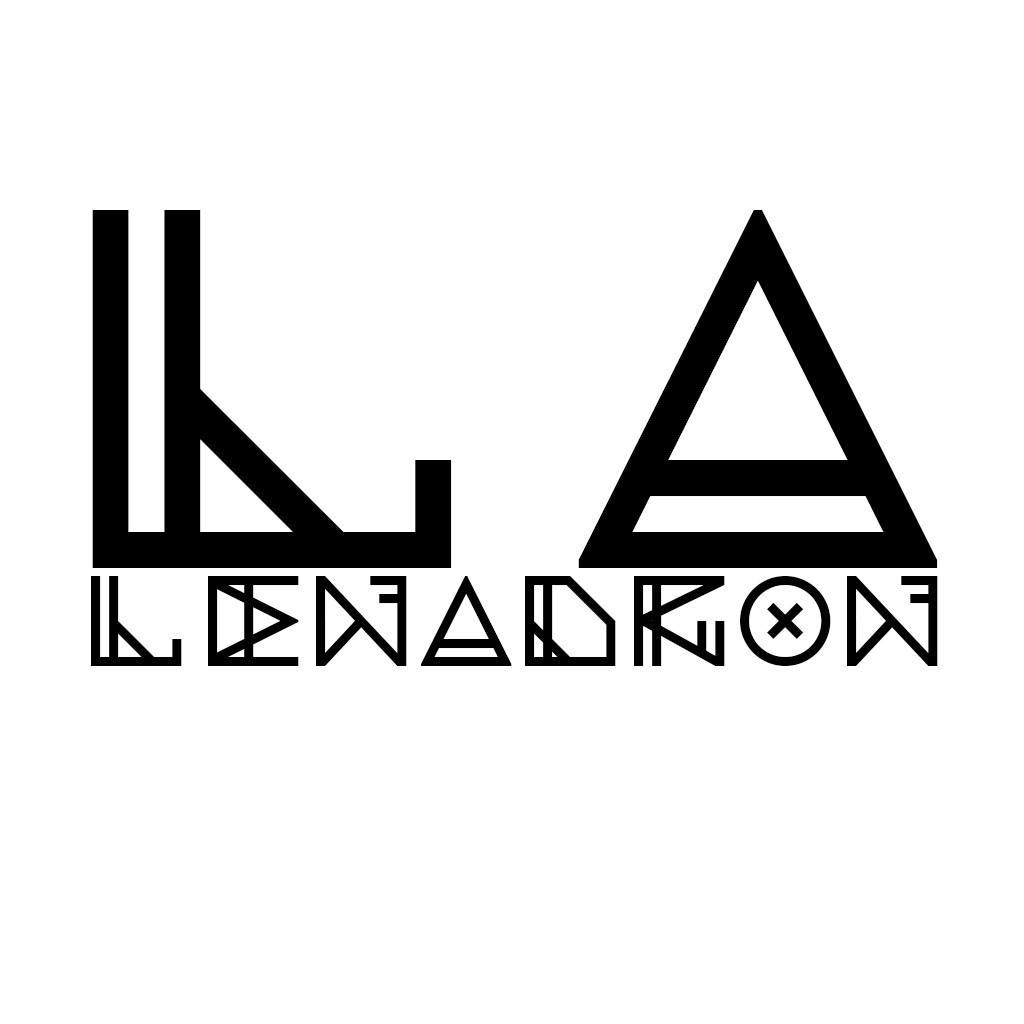
<style>
.page{position:relative;width:1024px;height:1024px;background:#ffffff}
.page>*{position:absolute;margin:0}
.t1{font:512px "TheElementarity";color:#000000}
.t2{font:129px "TheElementarity";color:#000000}
</style>
<div class="page">
<p class="t1" style="left:92px;top:210px;width:846px;height:358px">LA</p>
<p class="t2" style="left:91px;top:576px;width:847px;height:90px">Lenadron</p>
</div>
